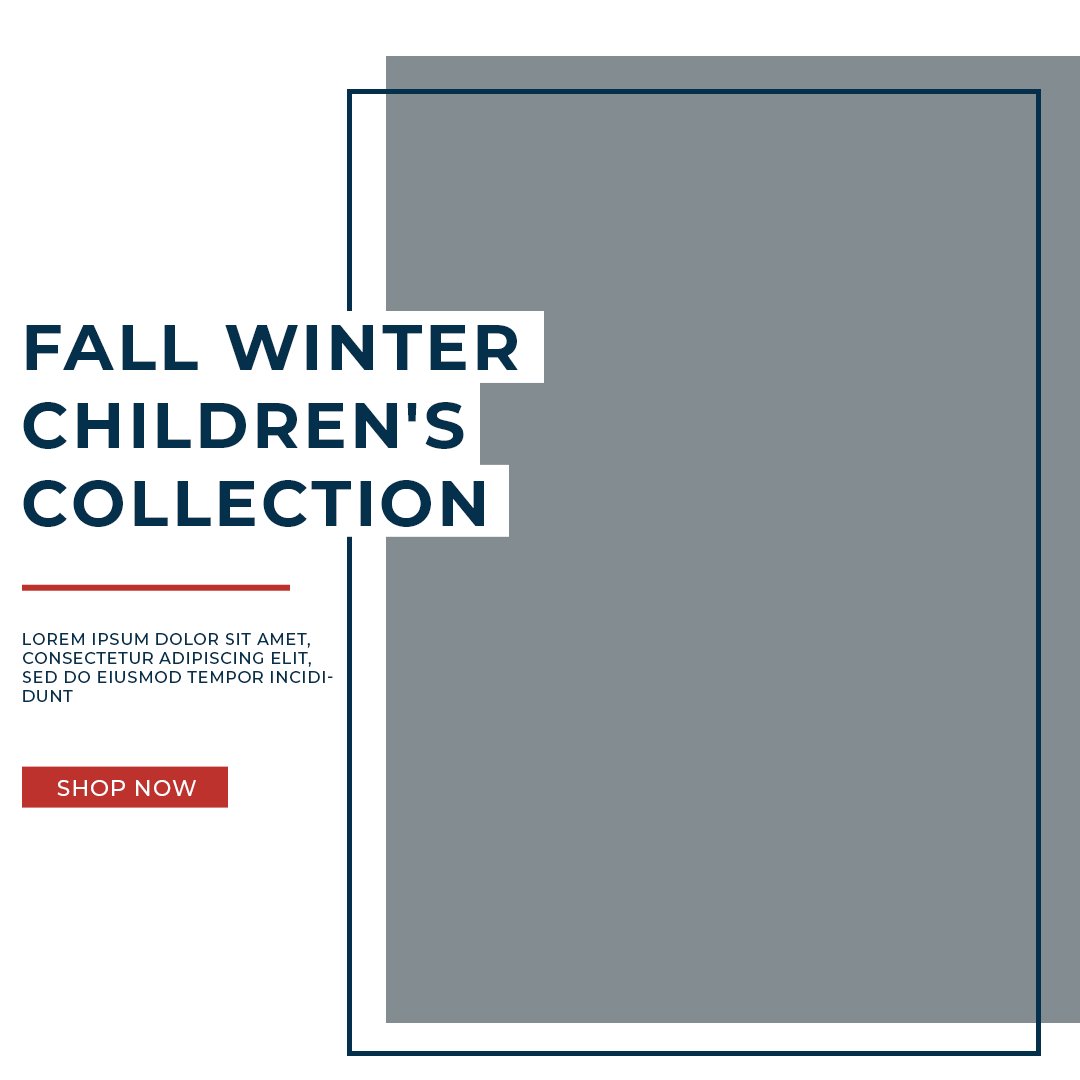
<style>
.page{position:relative;width:1080px;height:1080px;background:#838c91}
.page>*{position:absolute;margin:0}
.t1{font:64.9px "Montserrat-Bold";letter-spacing:0.05em;color:#04304b;text-transform:uppercase}
.t2{font:16px "Montserrat-Medium";letter-spacing:0.05em;color:#04304b;text-transform:uppercase}
.t3{font:22px "Montserrat-Medium";letter-spacing:0.05em;color:#ffffff;text-transform:uppercase}
</style>
<div class="page">
<p class="t1" style="left:23px;top:325px;width:495px;height:202px">Fall Winter <br>Children's <br>Collection</p>
<p class="t2" style="left:22px;top:633px;width:311px;height:69px">Lorem ipsum dolor sit amet, consectetur adipiscing elit, sed do eiusmod tempor incididunt</p>
<p class="t3" style="left:57px;top:780px;width:139px;height:16px">Shop Now</p>
</div>
